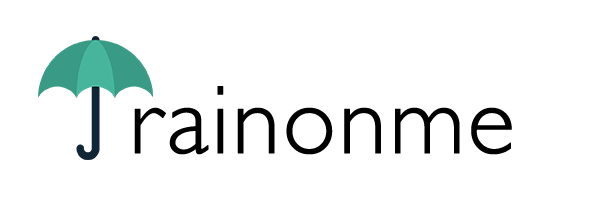
<style>
.page{position:relative;width:600px;height:200px;background:#ffffff}
.page>*{position:absolute;margin:0}
.t1{font:98px "GillSans-Light";color:#000000;font-weight:bold}
</style>
<div class="page">
<p class="t1" style="left:134px;top:86px;width:378px;height:69px">rainonme</p>
</div>
